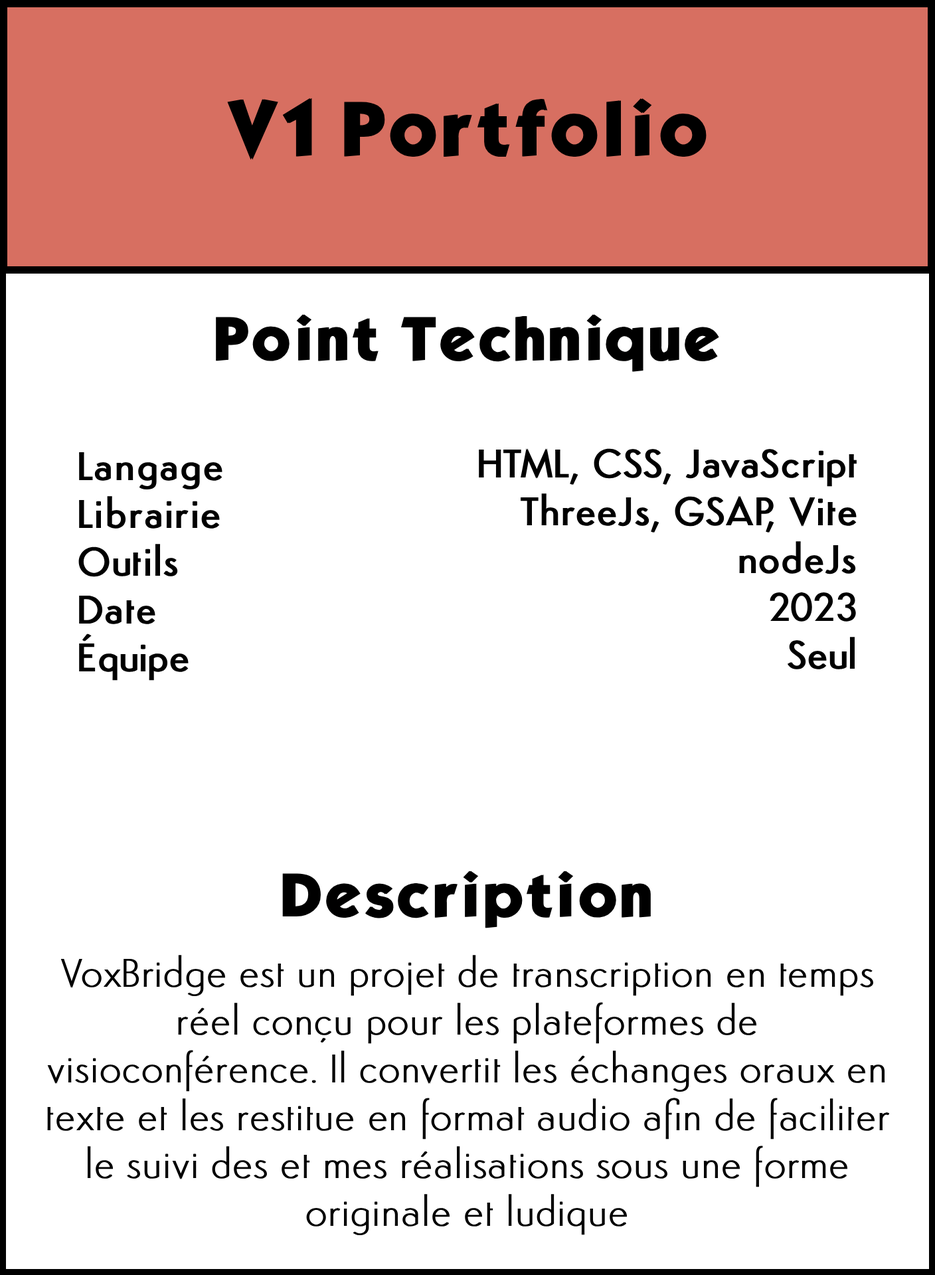
<style>
.page{position:relative;width:935px;height:1275px;background:#ffffff}
.page>*{position:absolute;margin:0}
.t1{font:66.4px "KabelBdNormal";color:#000000;font-weight:bold}
.t2{font:53.1px "KabelBdNormal";color:#000000;font-weight:bold}
.t3{font:39.8px "Semplicita-Medium";color:#000000;font-weight:bold}
.t4{font:39.8px "Semplicita-Light";color:#000000;font-weight:bold}
</style>
<div class="page">
<p class="t1" style="left:227px;top:98px;width:480px;height:62px">V1 Portfolio</p>
<p class="t2" style="left:216px;top:314px;width:503px;height:58px">Point Technique</p>
<p class="t3" style="left:479px;top:448px;width:378px;height:221px;text-align:right">HTML, CSS, JavaScript<br>ThreeJs, GSAP, Vite<br>nodeJs <br>2023<br>Seul</p>
<p class="t3" style="left:78px;top:452px;width:144px;height:229px">Langage<br>Librairie<br>Outils<br>Date<br>Équipe</p>
<p class="t2" style="left:282px;top:871px;width:369px;height:57px">Description</p>
<p class="t4" style="left:47px;top:955px;width:843px;height:280px;text-align:center">VoxBridge est un projet de transcription en temps réel conçu pour les plateformes de visioconférence. Il convertit les échanges oraux en texte et les restitue en format audio afin de faciliter le suivi des et mes réalisations sous une forme originale et ludique</p>
</div>
